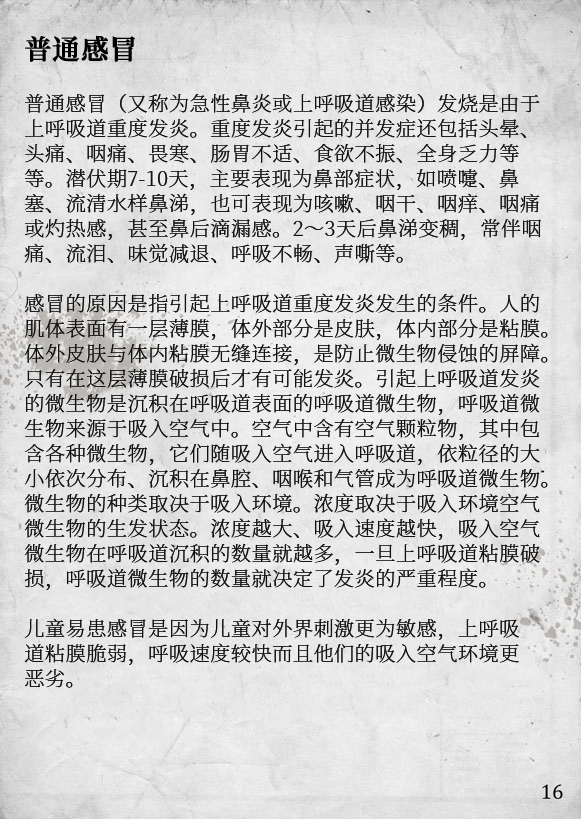
<style>
.page{position:relative;width:581px;height:819px}
.page>*{position:absolute;margin:0}
.t1{font:20.2px/25px "SourceHanSerifCN-ExtraLight";letter-spacing:0.02em;color:#111111}
.t2{font:27.2px/29px "SourceHanSerifCN-SemiBold";letter-spacing:0.02em;color:#000000;font-weight:bold}
</style>
<div class="page">
<p class="t1" style="left:24px;top:35px;width:524px;height:653px"><span class="t2">普通感冒<br><br></span>普通感冒（又称为急性鼻炎或上呼吸道感染）发烧是由于<br>上呼吸道重度发炎。重度发炎引起的并发症还包括头晕、<br>头痛、咽痛、畏寒、肠胃不适、食欲不振、全身乏力等<br>等。潜伏期7-10天，主要表现为鼻部症状，如喷嚏、鼻<br>塞、流清水样鼻涕，也可表现为咳嗽、咽干、咽痒、咽痛<br>或灼热感，甚至鼻后滴漏感。2～3天后鼻涕变稠，常伴咽<br>痛、流泪、味觉减退、呼吸不畅、声嘶等。<br><br>感冒的原因是指引起上呼吸道重度发炎发生的条件。人的<br>肌体表面有一层薄膜，体外部分是皮肤，体内部分是粘膜。<br>体外皮肤与体内粘膜无缝连接，是防止微生物侵蚀的屏障。<br>只有在这层薄膜破损后才有可能发炎。引起上呼吸道发炎<br>的微生物是沉积在呼吸道表面的呼吸道微生物，呼吸道微<br>生物来源于吸入空气中。空气中含有空气颗粒物，其中包<br>含各种微生物，它们随吸入空气进入呼吸道，依粒径的大<br>小依次分布、沉积在鼻腔、咽喉和气管成为呼吸道微生物。<br>微生物的种类取决于吸入环境。浓度取决于吸入环境空气<br>微生物的生发状态。浓度越大、吸入速度越快，吸入空气<br>微生物在呼吸道沉积的数量就越多，一旦上呼吸道粘膜破<br>损，呼吸道微生物的数量就决定了发炎的严重程度。<br><br>儿童易患感冒是因为儿童对外界刺激更为敏感，上呼吸<br>道粘膜脆弱，呼吸速度较快而且他们的吸入空气环境更<br>恶劣。</p>
</div>
